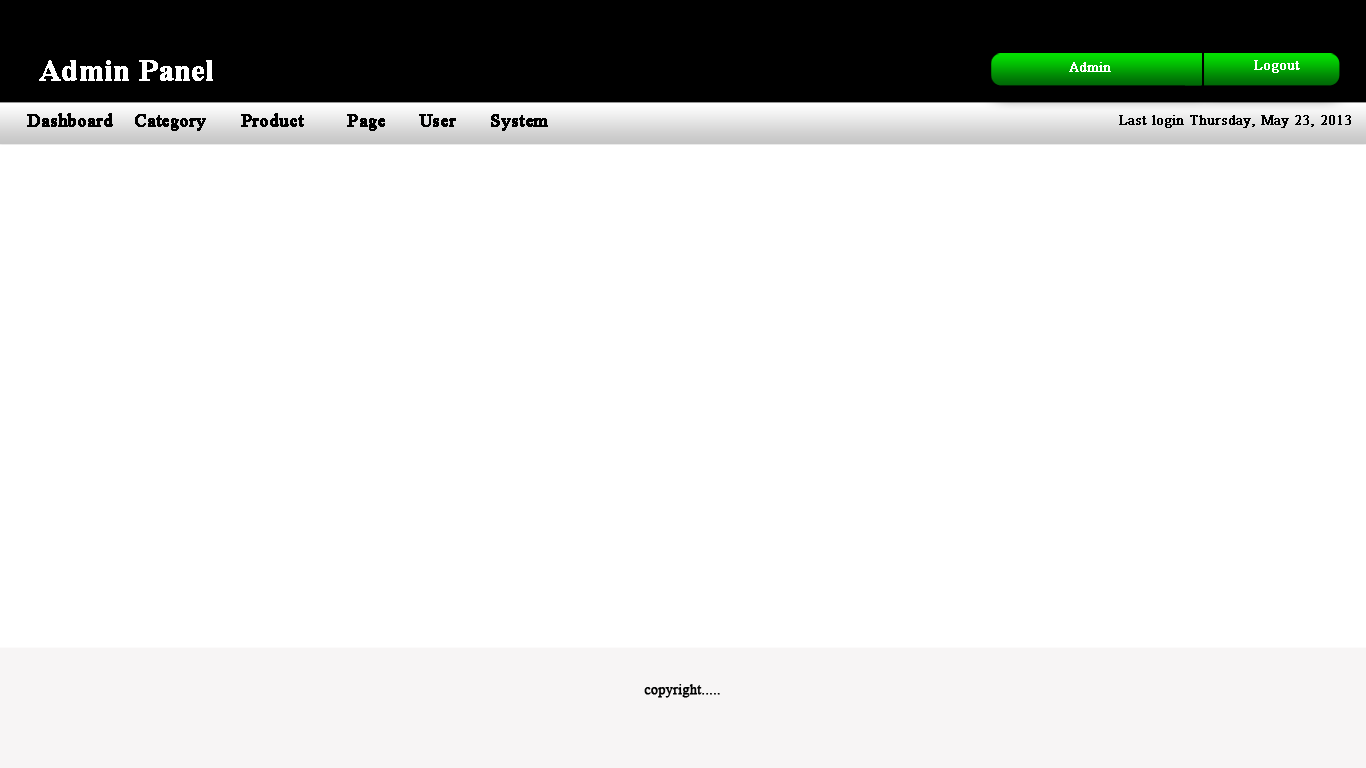
<style>
.page{position:relative;width:1366px;height:768px;background:#ffffff}
.page>*{position:absolute;margin:0}
.t1{font:30px "TimesNewRomanPS-BoldMT";color:#ffffff;font-weight:bold}
.t2{font:14px "TimesNewRomanPSMT";color:#ffffff;font-weight:bold}
.t3{font:18.5px "TimesNewRomanPSMT";color:#000000;font-weight:bold;scale:0.96 1}
.t4{font:14px "TimesNewRomanPSMT";color:#000000;font-weight:bold}
</style>
<div class="page">
<p class="t1" style="left:39px;top:60px;width:174px;height:21px">Admin Panel</p>
<p class="t2" style="left:1069px;top:62px;width:42px;height:10px">Admin</p>
<p class="t2" style="left:1254px;top:60px;width:46px;height:13px">Logout</p>
<p class="t3" style="left:27px;top:113px;width:521px;height:18px">Dashboard Category Product  Page User System</p>
<p class="t4" style="left:1119px;top:115px;width:232px;height:13px">Last login Thursday, May 23, 2013</p>
<p class="t4" style="left:644px;top:684px;width:76px;height:14px">copyright.....</p>
</div>
